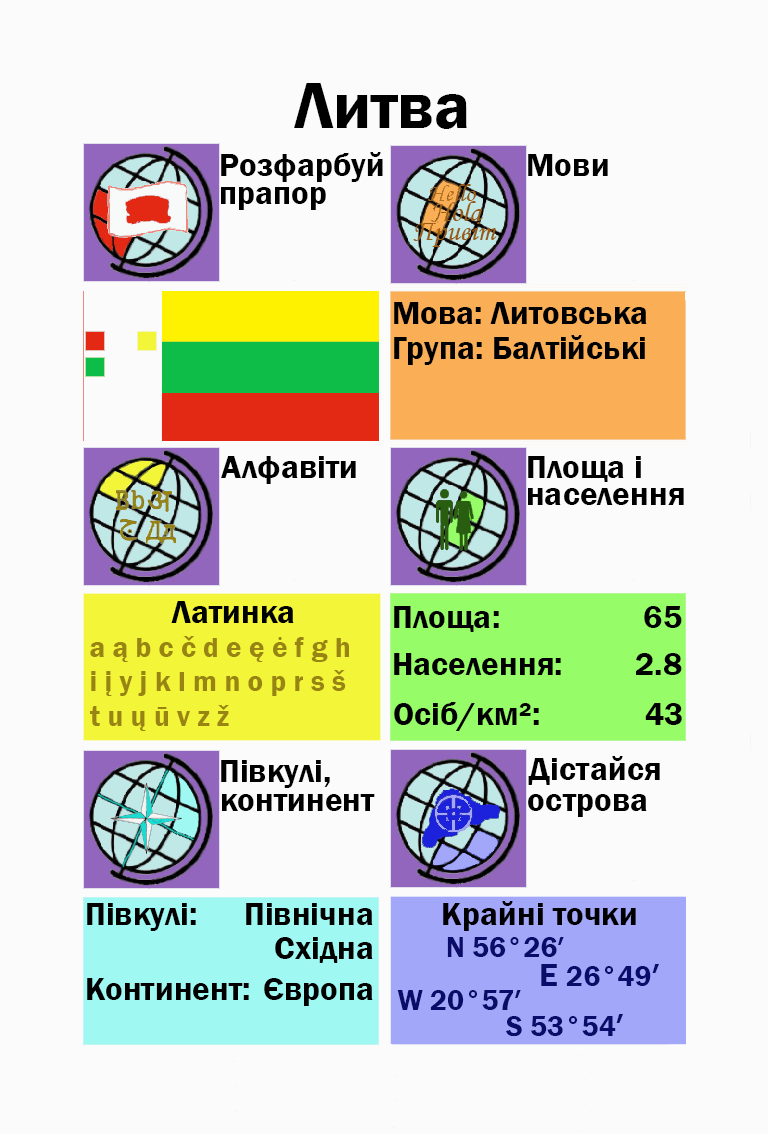
<style>
.page{position:relative;width:768px;height:1134px;background:#fbfbfb}
.page>*{position:absolute;margin:0}
.t1{font:66.7px "FranklinGothic-Demi";color:#000000}
.t2{font:33.3px "FranklinGothic-Demi";color:#000000}
.t3{font:33.3px "FranklinGothic-Demi";color:#000003}
.t4{font:29.2px "FranklinGothic-Demi";color:#988413}
.t5{font:29.2px "FranklinGothic-Demi";color:#090c69}
.t6{font:33.3px "FranklinGothic-Demi";color:#090c69}
</style>
<div class="page">
<p class="t1" style="left:294px;top:83px;width:173px;height:46px">Литва</p>
<p class="t2" style="left:221px;top:152px;width:162px;height:30px">Розфарбуй</p>
<p class="t2" style="left:528px;top:154px;width:80px;height:22px">Мови</p>
<p class="t2" style="left:221px;top:187px;width:105px;height:23px">прапор</p>
<p class="t2" style="left:394px;top:302px;width:253px;height:22px">Мова: Литовська</p>
<p class="t2" style="left:394px;top:335px;width:251px;height:30px">Група: Балтійські</p>
<p class="t2" style="left:221px;top:456px;width:135px;height:28px">Алфавіти</p>
<p class="t2" style="left:528px;top:456px;width:113px;height:26px">Площа і</p>
<p class="t2" style="left:528px;top:488px;width:156px;height:17px">населення</p>
<p class="t2" style="left:171px;top:601px;width:123px;height:22px">Латинка</p>
<p class="t2" style="left:394px;top:606px;width:105px;height:26px">Площа:</p>
<p class="t3" style="left:644px;top:606px;width:38px;height:22px">65</p>
<p class="t4" style="left:90px;top:636px;width:259px;height:26px">a ą b c č d e ę ė f g h</p>
<p class="t2" style="left:394px;top:653px;width:167px;height:22px">Населення:</p>
<p class="t2" style="left:636px;top:653px;width:46px;height:22px">2.8</p>
<p class="t4" style="left:91px;top:670px;width:255px;height:26px">i į y j k l m n o p r s š</p>
<p class="t2" style="left:394px;top:702px;width:145px;height:29px">Осіб/км²:</p>
<p class="t4" style="left:90px;top:705px;width:139px;height:26px">t u ų ū v z ž</p>
<p class="t2" style="left:645px;top:703px;width:37px;height:22px">43</p>
<p class="t2" style="left:221px;top:760px;width:109px;height:28px">Півкулі,</p>
<p class="t2" style="left:528px;top:756px;width:132px;height:29px">Дістайся</p>
<p class="t2" style="left:222px;top:794px;width:153px;height:17px">континент</p>
<p class="t2" style="left:528px;top:794px;width:119px;height:23px">острова</p>
<p class="t2" style="left:87px;top:903px;width:109px;height:28px">Півкулі:</p>
<p class="t2" style="left:246px;top:903px;width:127px;height:22px">Північна</p>
<p class="t3" style="left:443px;top:901px;width:193px;height:30px">Крайні точки</p>
<p class="t2" style="left:275px;top:937px;width:98px;height:26px">Східна</p>
<p class="t5" style="left:447px;top:937px;width:117px;height:20px">N 56°26′</p>
<p class="t5" style="left:541px;top:964px;width:118px;height:22px"><span class="t6">E </span>26°49<span class="t6">′</span></p>
<p class="t2" style="left:87px;top:978px;width:162px;height:22px">Континент:</p>
<p class="t2" style="left:264px;top:978px;width:109px;height:28px">Європа</p>
<p class="t5" style="left:397px;top:990px;width:124px;height:20px">W 20°57′</p>
<p class="t5" style="left:506px;top:1014px;width:117px;height:23px">S 53°54<span class="t6">′</span></p>
</div>
